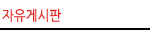
<style>
.page{position:relative;width:150px;height:30px;background:#ffffff}
.page>*{position:absolute;margin:0}
.t1{font:14px "NanumGothic";color:#dc241f;scale:0.9 1}
</style>
<div class="page">
<p class="t1" style="left:2px;top:9px;width:60px;height:13px">자유게시판</p>
</div>
